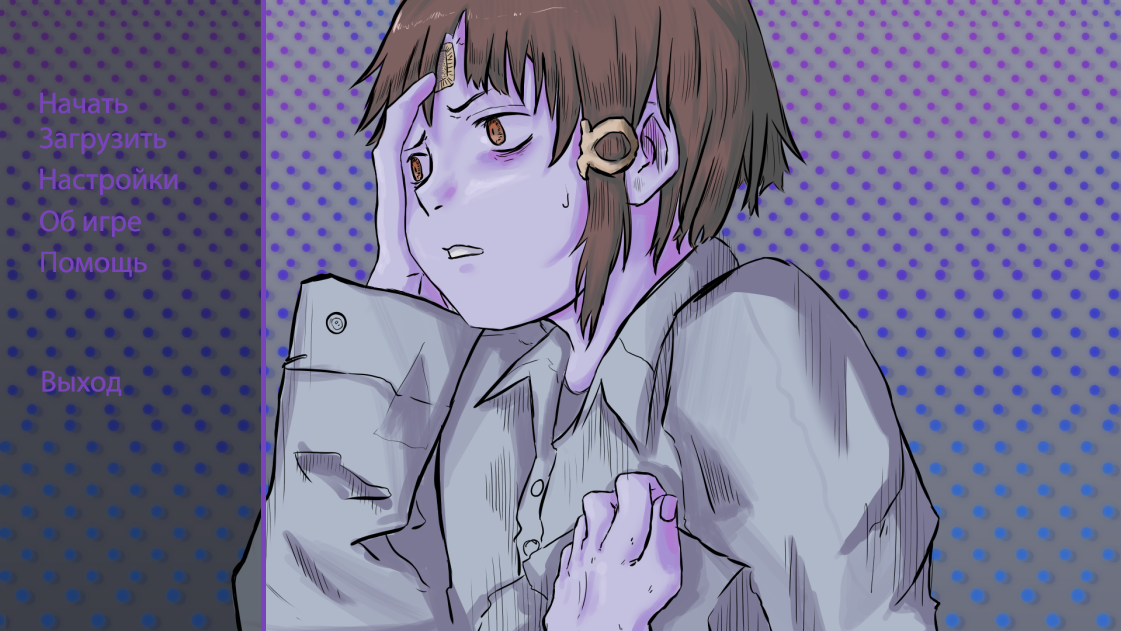
<style>
.page{position:relative;width:1121px;height:631px}
.page>*{position:absolute;margin:0}
.t1{font:30px "MyriadPro-Regular";color:#7943bc}
</style>
<div class="page">
<p class="t1" style="left:40px;top:92px;width:88px;height:22px">Начать</p>
<p class="t1" style="left:39px;top:127px;width:128px;height:28px">Загрузить</p>
<p class="t1" style="left:40px;top:168px;width:138px;height:27px">Настройки</p>
<p class="t1" style="left:40px;top:209px;width:101px;height:28px">Об игре</p>
<p class="t1" style="left:41px;top:251px;width:106px;height:26px">Помощь</p>
<p class="t1" style="left:42px;top:370px;width:80px;height:26px">Выход</p>
</div>
